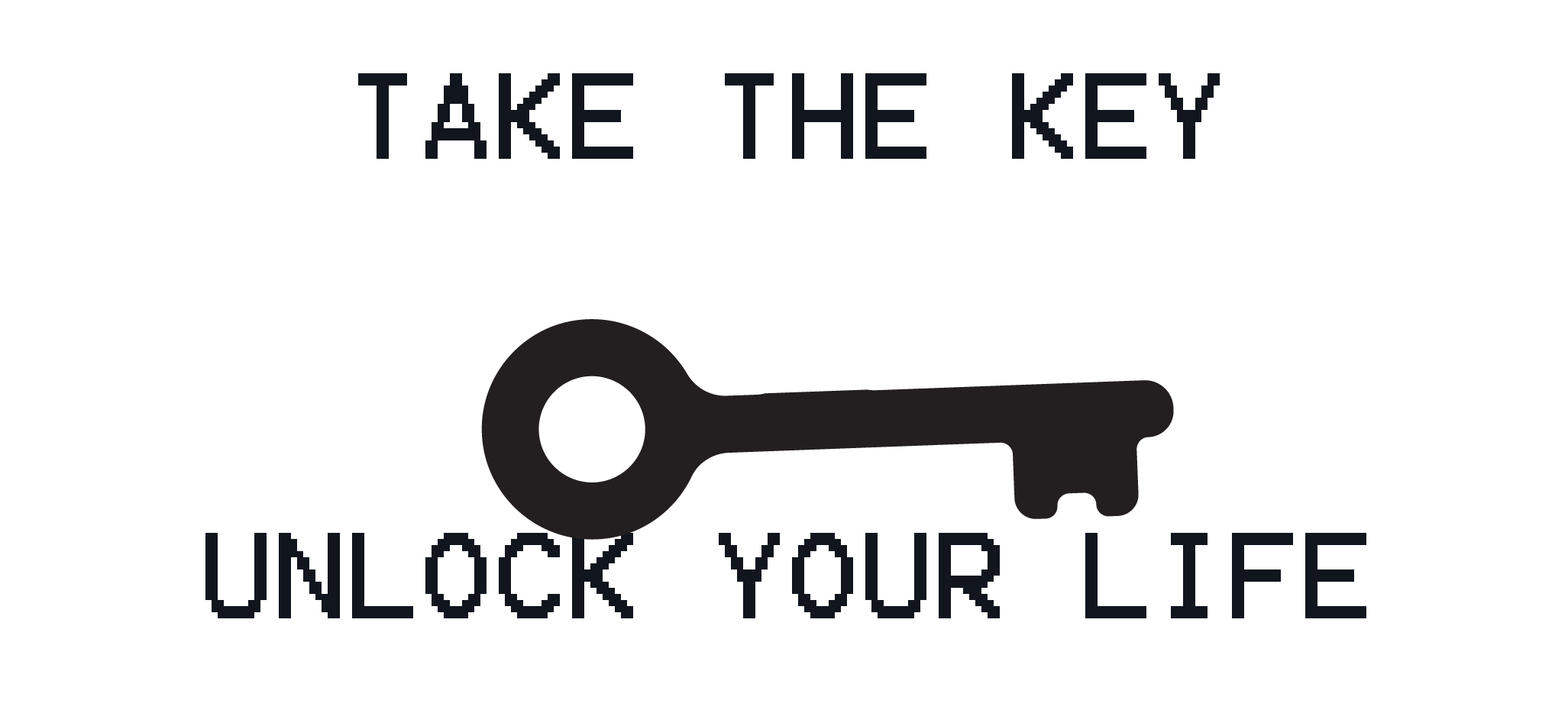
<style>
.page{position:relative;width:1568px;height:713px;background:#ffffff}
.page>*{position:absolute;margin:0}
.t1{font:97.8px "Terminal";color:#11151e}
</style>
<div class="page">
<p class="t1" style="left:358px;top:73px;width:862px;height:86px">TAKE THE KEY</p>
<p class="t1" style="left:205px;top:533px;width:1161px;height:86px">UNLOCK YOUR LIFE</p>
</div>
